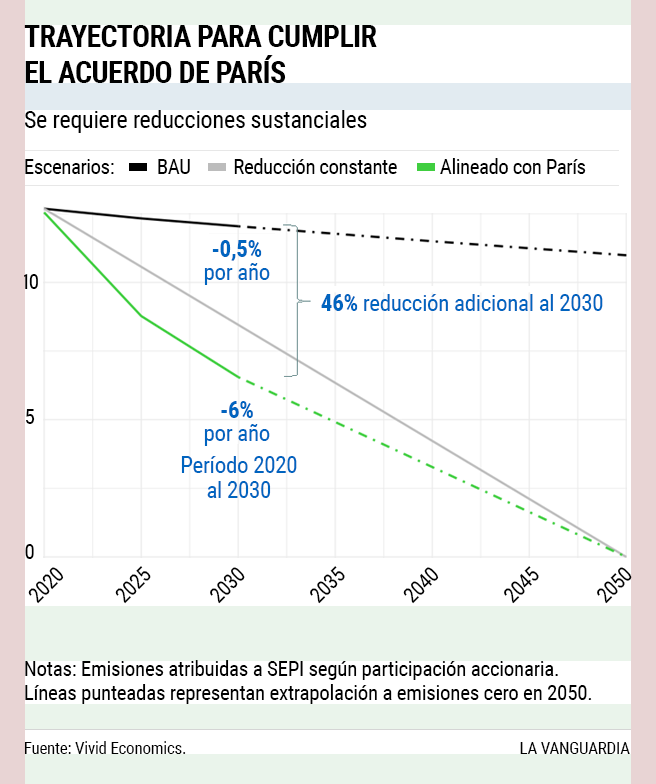
<style>
.page{position:relative;width:656px;height:784px;background:#ffffff}
.page>*{position:absolute;margin:0}
.t1{font:30px/36px "RobotoCondensed-Bold";letter-spacing:-0.02em;color:#000000;text-transform:uppercase}
.t2{font:24px "RobotoCondensed-Regular";letter-spacing:-0.01em;color:#000000}
.t3{font:21px "RobotoCondensed-Regular";letter-spacing:-0.025em;color:#000000}
.t4{font:23px/23px "RobotoCondensed-Regular";letter-spacing:-0.014em;color:#0064bf}
.t5{font:23px/23px "RobotoCondensed-Bold";letter-spacing:-0.014em;color:#0064bf}
.t6{font:21px/27px "RobotoCondensed-Regular";letter-spacing:-0.014em;color:#000000}
.t7{font:21px/27px "RobotoCondensed-Regular";letter-spacing:-0.104em;color:#000000}
.t8{font:23px "RobotoCondensed-Regular";letter-spacing:-0.014em;color:#0064bf}
.t9{font:23px "RobotoCondensed-Bold";letter-spacing:-0.014em;color:#0064bf}
.t10{font:23px/25px "RobotoCondensed-Regular";letter-spacing:-0.014em;color:#0064bf}
.t11{font:21px "RobotoCondensed-Regular";letter-spacing:-0.03em;color:#000000}
.t12{font:21px/24px "RobotoCondensed-Regular";letter-spacing:-0.014em;color:#000000}
.t13{font:17px "RobotoCondensed-Regular";letter-spacing:-0.014em;color:#000000}
</style>
<div class="page">
<p class="t1" style="left:24px;top:25px;width:353px;height:58px">TRAYECTORIA PARA CUMPLIR <br>EL aCUERDO DE pARÍS</p>
<p class="t2" style="left:25px;top:110px;width:342px;height:23px">Se requiere reducciones sustanciales</p>
<p class="t3" style="left:25px;top:158px;width:561px;height:16px">Escenarios:          BAU          Reducción constante          Alineado con París</p>
<p class="t4" style="left:204px;top:240px;width:66px;height:45px;text-align:center"><span class="t5">-0,5% <br></span>por año</p>
<p class="t6" style="left:22px;top:274px;width:16px;height:285px;text-align:center"><span class="t7">10<br></span><br><br><br><br>5<br><br><br><br><br>0</p>
<p class="t8" style="left:321px;top:294px;width:282px;height:17px"><span class="t9">46%</span> reducción adicional al 2030</p>
<p class="t4" style="left:204px;top:401px;width:66px;height:45px;text-align:center"><span class="t5">-6%</span> <br>por año</p>
<p class="t10" style="left:181px;top:456px;width:116px;height:42px;text-align:center">Período 2020<br>al 2030</p>
<p class="t11" style="left:28px;top:567px;width:36px;height:37px;rotate:-45deg">2020</p>
<p class="t11" style="left:115px;top:566px;width:36px;height:38px;rotate:-45deg">2025</p>
<p class="t11" style="left:210px;top:567px;width:35px;height:37px;rotate:-45deg">2030</p>
<p class="t11" style="left:310px;top:566px;width:35px;height:38px;rotate:-45deg">2035</p>
<p class="t11" style="left:403px;top:567px;width:36px;height:37px;rotate:-45deg">2040</p>
<p class="t11" style="left:504px;top:566px;width:35px;height:38px;rotate:-45deg">2045</p>
<p class="t11" style="left:597px;top:567px;width:35px;height:37px;rotate:-45deg">2050</p>
<p class="t12" style="left:25px;top:660px;width:567px;height:44px">Notas: Emisiones atribuidas a SEPI según participación accionaria. <br>Líneas punteadas representan extrapolación a emisiones cero en 2050.</p>
<p class="t13" style="left:24px;top:741px;width:162px;height:13px">Fuente: Vivid Economics.</p>
<p class="t13" style="left:520px;top:742px;width:110px;height:12px">LA VANGUARDIA</p>
</div>
